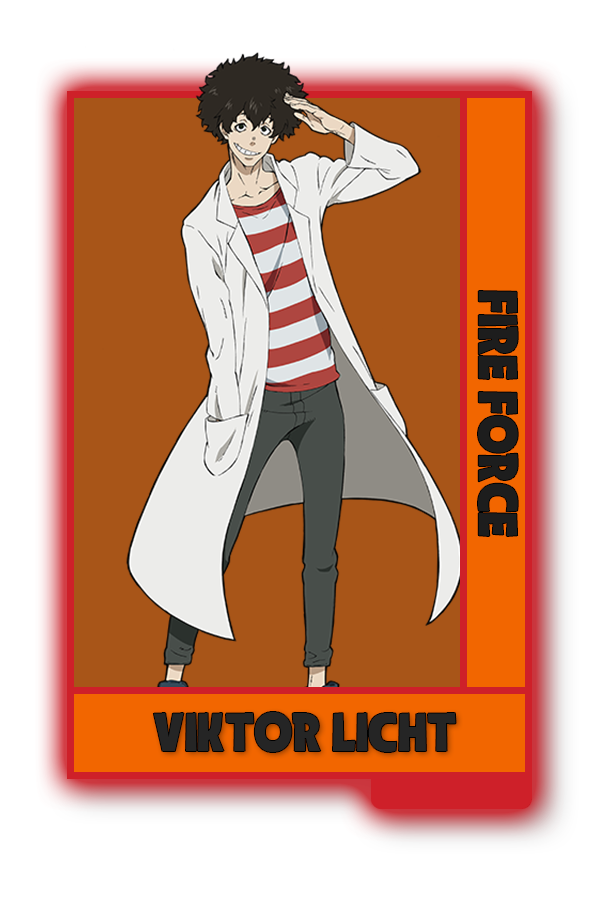
<style>
.page{position:relative;width:600px;height:900px;background:#a85518}
.page>*{position:absolute;margin:0}
.t1{font:69.6px "AristonComicDemo-Regular";color:#1d1d1d}
.t2{font:69.1px "AristonComicDemo-Regular";color:#252525}
</style>
<div class="page">
<p class="t1" style="left:478px;top:291px;width:40px;height:245px;rotate:90deg">FIRE FORCE</p>
<p class="t2" style="left:153px;top:712px;width:303px;height:40px">VIKTOR LICHT</p>
</div>
